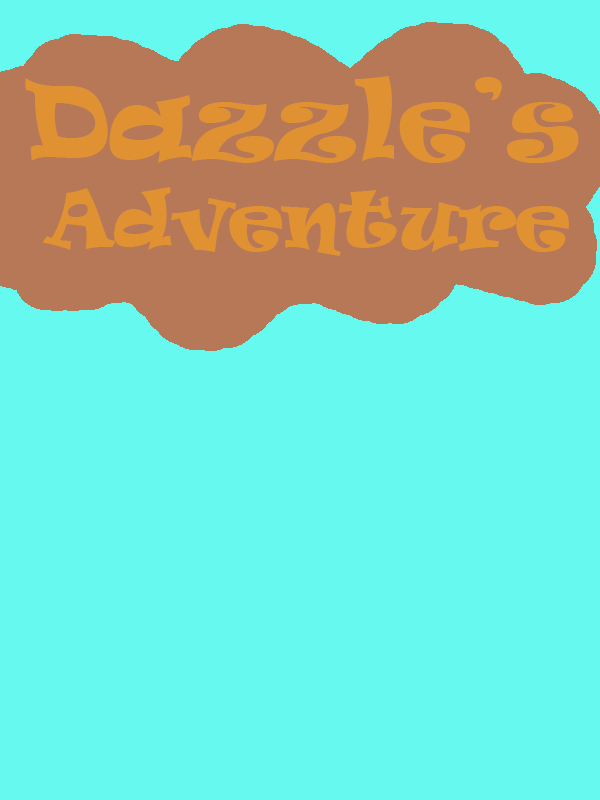
<style>
.page{position:relative;width:600px;height:800px;background:#66f9ef}
.page>*{position:absolute;margin:0}
.t1{font:100px "Ravie";color:#e09233}
.t2{font:75px "Ravie";color:#e09131}
</style>
<div class="page">
<p class="t1" style="left:25px;top:76px;width:554px;height:87px">Dazzle’s</p>
<p class="t2" style="left:42px;top:187px;width:527px;height:69px">Adventure</p>
</div>
